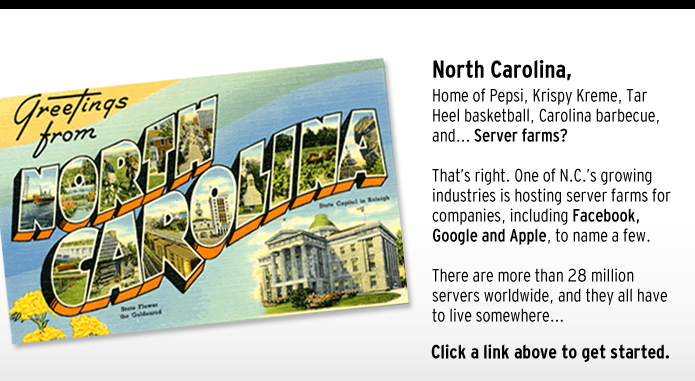
<style>
.page{position:relative;width:695px;height:381px;background:#ffffff}
.page>*{position:absolute;margin:0}
.t1{font:18px/20px "InterstateCondMono-Lgt";color:#000000}
.t2{font:24px/60px "InterstateCondensedBold";color:#000000}
.t3{font:18px/24px "InterstateCondMono-Lgt";color:#000000}
.t4{font:18px/20px "InterstateCondMono";color:#000000}
.t5{font:19px "InterstateCondensedBold";color:#000000}
</style>
<div class="page">
<p class="t1" style="left:432px;top:60px;width:239px;height:262px"><span class="t2">North Carolina,<br></span><span class="t3">Home of Pepsi, Krispy Kreme, Tar </span>Heel basketball, Carolina barbecue, and... <span class="t4">Server farms? <br><br></span>That’s right. One of N.C.’s growing industries is hosting server farms for companies, including <span class="t4">Facebook, Google and Apple</span>, to name a few.<br><br>There are more than 28 million servers worldwide, and they all have to live somewhere...</p>
<p class="t5" style="left:431px;top:344px;width:238px;height:18px">Click a link above to get started.</p>
</div>
